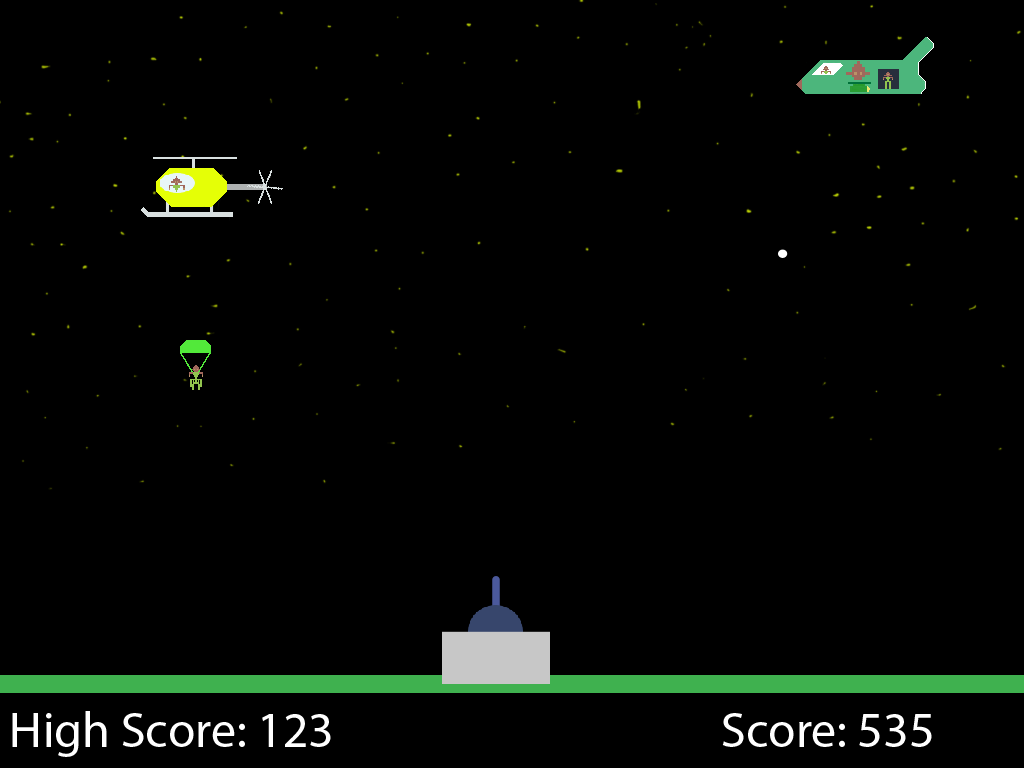
<style>
.page{position:relative;width:1024px;height:768px;background:#000000}
.page>*{position:absolute;margin:0}
.t1{font:12px "MyriadPro-Regular";color:#ffffff}
</style>
<div class="page">
<p class="t1" style="left:12px;top:711px;width:319px;height:46px">High Score: 123</p>
<p class="t1" style="left:722px;top:713px;width:210px;height:34px">Score: 535</p>
</div>
